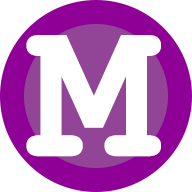
<style>
.page{position:relative;width:192px;height:192px;background:#ffffff}
.page>*{position:absolute;margin:0}
.t1{font:204px "CourierNewPS-BoldMT";color:#ffffff;font-weight:bold}
</style>
<div class="page">
<p class="t1" style="left:26px;top:35px;width:135px;height:122px">M</p>
</div>
